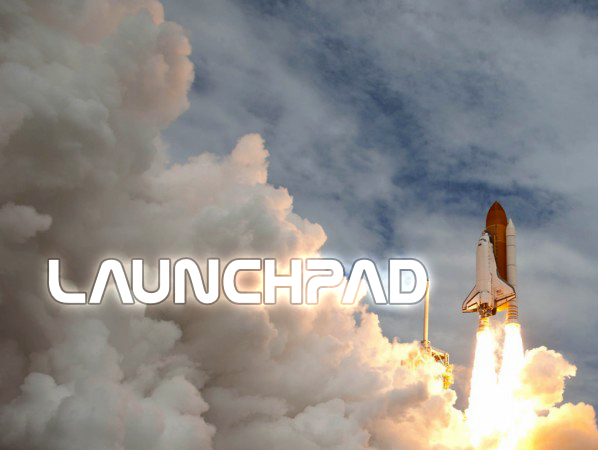
<style>
.page{position:relative;width:598px;height:450px}
.page>*{position:absolute;margin:0}
.t1{font:72px "Nasalization";letter-spacing:0.02em;color:#ffffff;text-transform:uppercase}
</style>
<div class="page">
<p class="t1" style="left:48px;top:259px;width:379px;height:45px">LAUNCHPAD</p>
</div>
